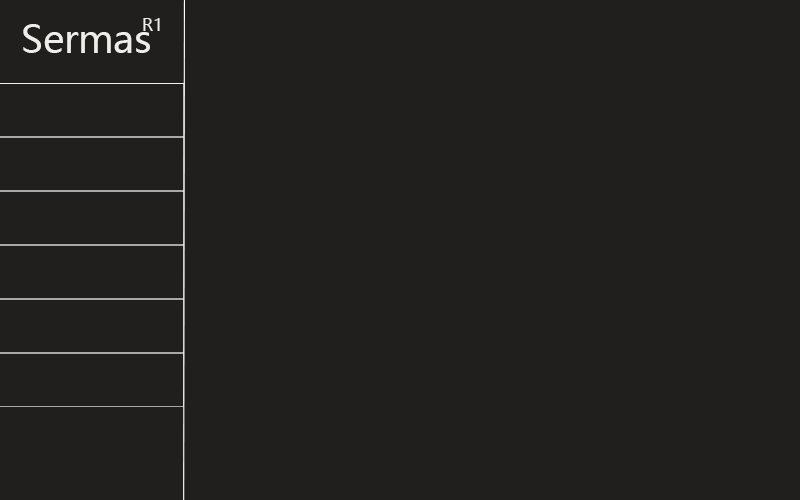
<style>
.page{position:relative;width:800px;height:500px;background:#211f1e}
.page>*{position:absolute;margin:0}
.t1{font:37.5px "MicrosoftYaHeiUI";color:#efede8}
.t2{font:16.7px "MicrosoftYaHeiUI";color:#efede8}
</style>
<div class="page">
<p class="t1" style="left:23px;top:24px;width:127px;height:29px">Sermas</p>
<p class="t2" style="left:143px;top:18px;width:17px;height:13px">R1</p>
</div>
